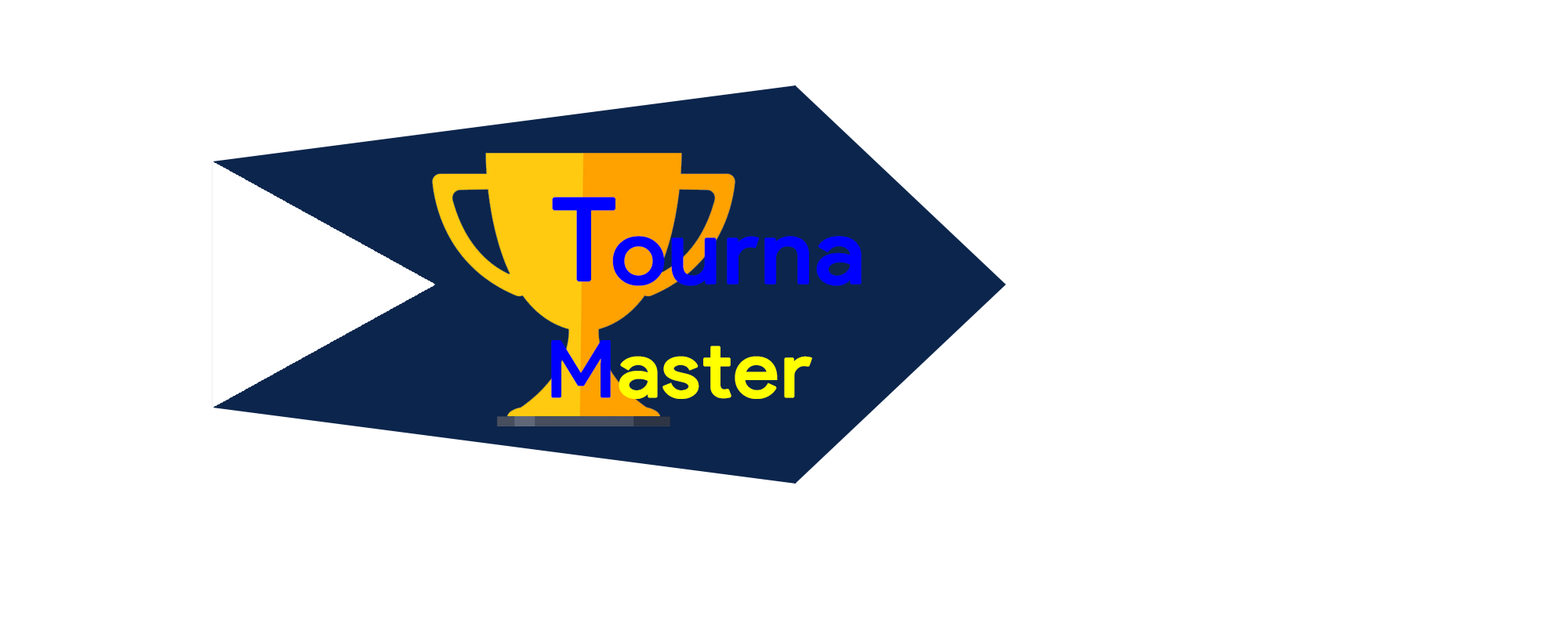
<style>
.page{position:relative;width:1568px;height:627px;background:#ffffff}
.page>*{position:absolute;margin:0}
.t1{font:113px "ProductSans-Regular";color:#0000ff;font-weight:bold;scale:1.08 1}
.t2{font:89.7px "ProductSans-Regular";color:#0000ff;font-weight:bold;scale:1.08 1}
.t3{font:77.3px "ProductSans-Regular";color:#ffff00;font-weight:bold;scale:1.08 1}
.t4{font:77.3px "ProductSans-Regular";color:#0000ff;font-weight:bold;scale:1.08 1}
</style>
<div class="page">
<p class="t1" style="left:552px;top:197px;width:63px;height:85px">T</p>
<p class="t2" style="left:612px;top:236px;width:250px;height:50px">ourna</p>
<p class="t3" style="left:551px;top:340px;width:261px;height:59px"><span class="t4">M</span>aster</p>
</div>
